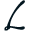
<style>
.page{position:relative;width:32px;height:32px;background:#ffffff}
.page>*{position:absolute;margin:0}
.t1{font:48px "Sanctuary-Playground";color:#04161f;font-weight:bold}
</style>
<div class="page">
<p class="t1" style="left:4px;top:0px;width:21px;height:31px">L</p>
</div>
